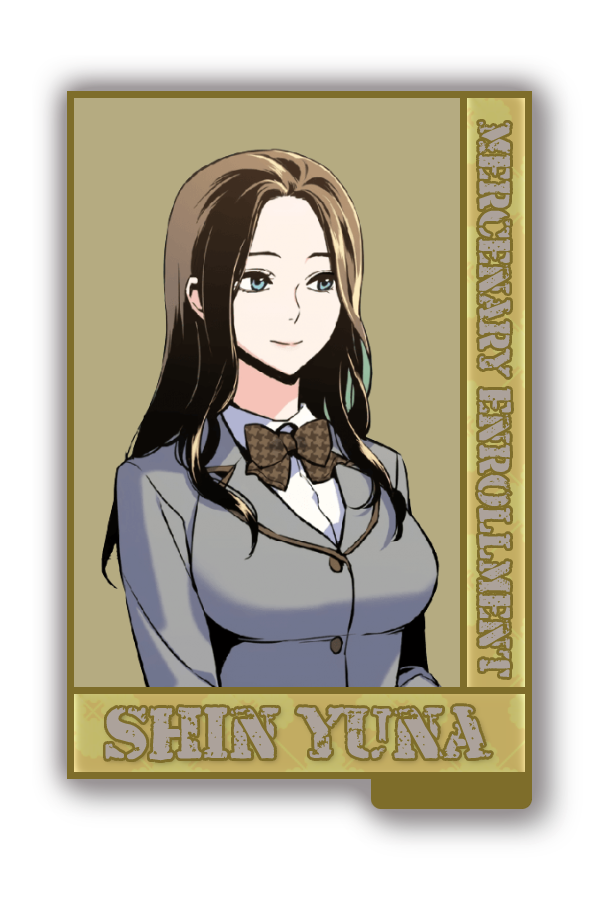
<style>
.page{position:relative;width:600px;height:900px;background:#ffffff}
.page>*{position:absolute;margin:0}
.t1{font:45px "ArmaliteRifle";color:#aca29b}
.t2{font:75px "ArmaliteRifle";color:#aca29b}
</style>
<div class="page">
<p class="t1" style="left:477px;top:121px;width:34px;height:556px;rotate:90deg">Mercenary Enrollment</p>
<p class="t2" style="left:105px;top:706px;width:386px;height:55px">Shin yuna</p>
</div>
